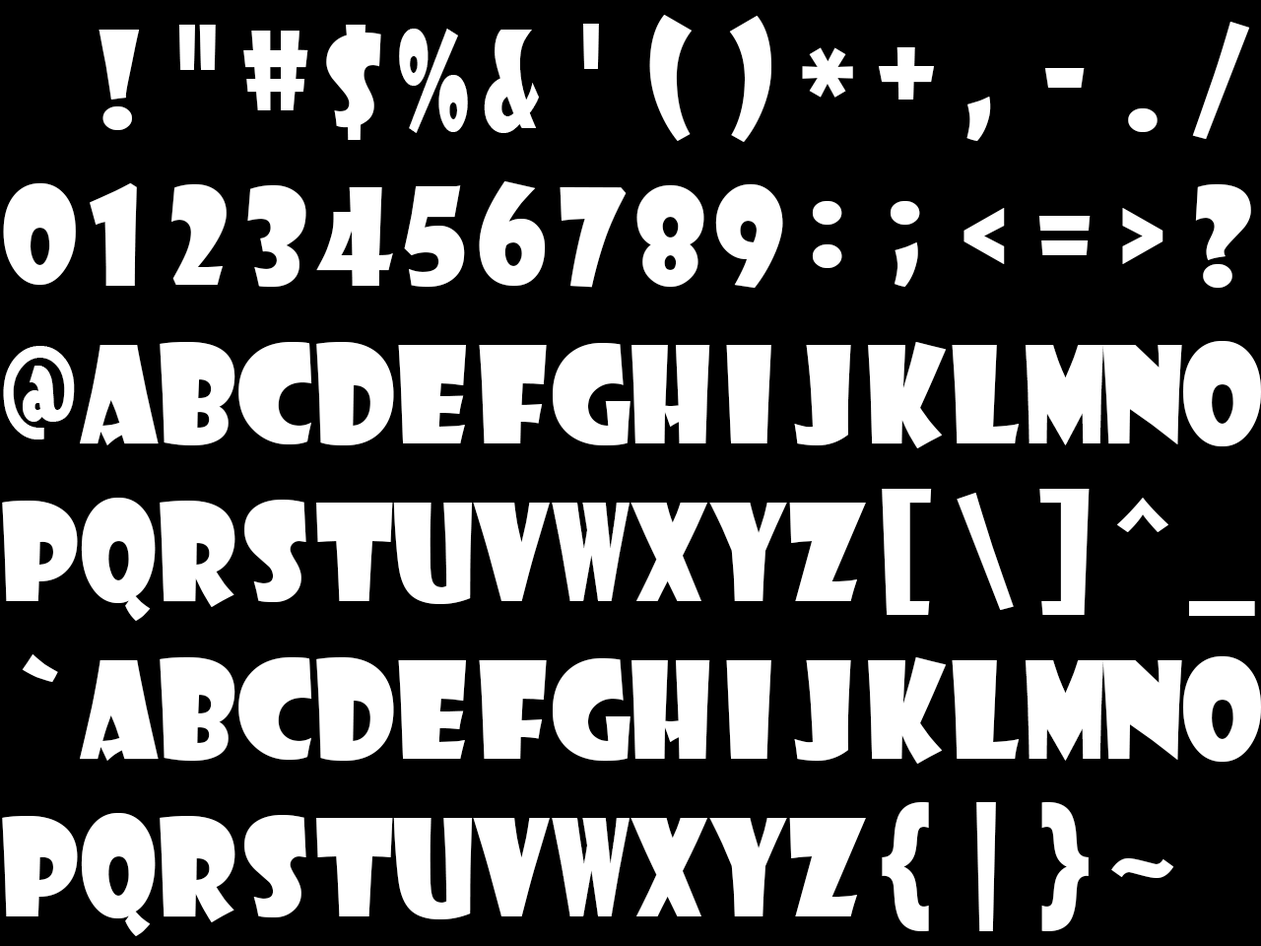
<style>
.page{position:relative;width:1261px;height:946px;background:#000000}
.page>*{position:absolute;margin:0}
.t1{font:131.3px "ShowcardGothic-Reg";color:#ffffff}
.t2{font:131.3px "ShowcardGothic-Reg";color:#ffffff;scale:0.7 1}
.t3{font:131.3px "ShowcardGothic-Reg";color:#ffffff;scale:0.9 1}
.t4{font:131.3px "ShowcardGothic-Reg";color:#ffffff;scale:0.88 1}
.t5{font:131.3px "ShowcardGothic-Reg";color:#ffffff;scale:0.83 1}
.t6{font:131.3px "ShowcardGothic-Reg";color:#ffffff;scale:0.75 1}
.t7{font:131.3px "ShowcardGothic-Reg";color:#ffffff;scale:0.95 1}
.t8{font:131.3px "ShowcardGothic-Reg";color:#ffffff;scale:0.8 1}
.t9{font:131.3px "ShowcardGothic-Reg";color:#ffffff;scale:0.85 1}
.t10{font:131.3px "ShowcardGothic-Reg";color:#ffffff;scale:0.87 1}
.t11{font:131.3px "ShowcardGothic-Reg";color:#ffffff;scale:0.89 1}
.t12{font:131.3px "ShowcardGothic-Reg";color:#ffffff;scale:0.58 1}
</style>
<div class="page">
<p class="t1" style="left:649px;top:15px;width:43px;height:126px">(</p>
<p class="t1" style="left:729px;top:16px;width:42px;height:126px">)</p>
<p class="t1" style="left:99px;top:30px;width:41px;height:100px">!</p>
<p class="t1" style="left:178px;top:25px;width:38px;height:45px">"</p>
<p class="t1" style="left:326px;top:25px;width:55px;height:115px">$</p>
<p class="t2" style="left:399px;top:29px;width:69px;height:104px">%</p>
<p class="t2" style="left:484px;top:30px;width:55px;height:103px">&amp;</p>
<p class="t1" style="left:582px;top:24px;width:17px;height:45px">'</p>
<p class="t1" style="left:1192px;top:22px;width:58px;height:117px">/</p>
<p class="t1" style="left:243px;top:31px;width:65px;height:79px">#</p>
<p class="t1" style="left:802px;top:47px;width:51px;height:51px">*</p>
<p class="t1" style="left:879px;top:47px;width:55px;height:52px">+</p>
<p class="t1" style="left:1044px;top:68px;width:41px;height:20px">-</p>
<p class="t1" style="left:966px;top:97px;width:25px;height:44px">,</p>
<p class="t1" style="left:1128px;top:108px;width:29px;height:24px">.</p>
<p class="t1" style="left:3px;top:183px;width:73px;height:102px">0</p>
<p class="t1" style="left:90px;top:183px;width:47px;height:103px">1</p>
<p class="t1" style="left:171px;top:184px;width:56px;height:101px">2</p>
<p class="t1" style="left:247px;top:185px;width:59px;height:102px">3</p>
<p class="t1" style="left:404px;top:185px;width:61px;height:102px">5</p>
<p class="t1" style="left:479px;top:181px;width:67px;height:105px">6</p>
<p class="t1" style="left:636px;top:185px;width:68px;height:102px">8</p>
<p class="t1" style="left:715px;top:184px;width:68px;height:104px">9</p>
<p class="t1" style="left:1195px;top:184px;width:56px;height:104px">?</p>
<p class="t1" style="left:316px;top:187px;width:77px;height:99px">4</p>
<p class="t1" style="left:560px;top:187px;width:67px;height:101px">7</p>
<p class="t1" style="left:812px;top:201px;width:30px;height:67px">:</p>
<p class="t1" style="left:890px;top:201px;width:30px;height:86px">;</p>
<p class="t1" style="left:963px;top:208px;width:42px;height:56px">&lt;</p>
<p class="t1" style="left:1122px;top:208px;width:41px;height:56px">&gt;</p>
<p class="t1" style="left:1038px;top:216px;width:52px;height:39px">=</p>
<p class="t3" style="left:160px;top:342px;width:75px;height:103px">B</p>
<p class="t1" style="left:238px;top:342px;width:74px;height:102px">C</p>
<p class="t4" style="left:316px;top:342px;width:78px;height:103px">D</p>
<p class="t5" style="left:868px;top:342px;width:79px;height:106px">K</p>
<p class="t3" style="left:1183px;top:341px;width:78px;height:105px">O</p>
<p class="t6" style="left:3px;top:346px;width:72px;height:93px">@</p>
<p class="t7" style="left:80px;top:345px;width:79px;height:100px">A</p>
<p class="t1" style="left:398px;top:345px;width:68px;height:98px">E</p>
<p class="t1" style="left:479px;top:345px;width:68px;height:98px">F</p>
<p class="t3" style="left:553px;top:343px;width:77px;height:102px">G</p>
<p class="t8" style="left:631px;top:345px;width:79px;height:98px">H</p>
<p class="t1" style="left:726px;top:345px;width:45px;height:98px">I</p>
<p class="t1" style="left:794px;top:345px;width:57px;height:100px">J</p>
<p class="t1" style="left:952px;top:345px;width:68px;height:98px">L</p>
<p class="t6" style="left:1025px;top:345px;width:78px;height:100px">M</p>
<p class="t1" style="left:1102px;top:345px;width:80px;height:99px">N</p>
<p class="t9" style="left:81px;top:497px;width:75px;height:124px">Q</p>
<p class="t1" style="left:882px;top:489px;width:50px;height:126px">[</p>
<p class="t1" style="left:957px;top:493px;width:57px;height:117px">\</p>
<p class="t1" style="left:1039px;top:489px;width:51px;height:126px">]</p>
<p class="t1" style="left:1116px;top:497px;width:52px;height:35px">^</p>
<p class="t3" style="left:2px;top:500px;width:76px;height:101px">P</p>
<p class="t10" style="left:160px;top:500px;width:75px;height:107px">R</p>
<p class="t1" style="left:244px;top:499px;width:62px;height:103px">S</p>
<p class="t7" style="left:316px;top:502px;width:77px;height:99px">T</p>
<p class="t11" style="left:393px;top:502px;width:80px;height:102px">U</p>
<p class="t3" style="left:473px;top:502px;width:77px;height:99px">V</p>
<p class="t12" style="left:552px;top:502px;width:77px;height:99px">W</p>
<p class="t8" style="left:630px;top:502px;width:77px;height:99px">X</p>
<p class="t9" style="left:709px;top:502px;width:78px;height:99px">Y</p>
<p class="t7" style="left:789px;top:502px;width:77px;height:99px">Z</p>
<p class="t1" style="left:1189px;top:601px;width:66px;height:15px">_</p>
<p class="t1" style="left:22px;top:654px;width:36px;height:28px">`</p>
<p class="t7" style="left:80px;top:660px;width:79px;height:100px">A</p>
<p class="t3" style="left:160px;top:657px;width:75px;height:103px">B</p>
<p class="t1" style="left:238px;top:657px;width:74px;height:103px">C</p>
<p class="t4" style="left:316px;top:657px;width:78px;height:103px">D</p>
<p class="t1" style="left:398px;top:660px;width:68px;height:99px">E</p>
<p class="t1" style="left:479px;top:660px;width:68px;height:99px">F</p>
<p class="t3" style="left:553px;top:658px;width:77px;height:102px">G</p>
<p class="t8" style="left:631px;top:660px;width:79px;height:99px">H</p>
<p class="t1" style="left:726px;top:660px;width:45px;height:99px">I</p>
<p class="t1" style="left:794px;top:660px;width:57px;height:100px">J</p>
<p class="t5" style="left:868px;top:657px;width:79px;height:106px">K</p>
<p class="t1" style="left:952px;top:660px;width:68px;height:99px">L</p>
<p class="t6" style="left:1025px;top:660px;width:78px;height:100px">M</p>
<p class="t1" style="left:1102px;top:660px;width:80px;height:100px">N</p>
<p class="t3" style="left:1183px;top:656px;width:78px;height:105px">O</p>
<p class="t7" style="left:882px;top:802px;width:47px;height:129px">{</p>
<p class="t7" style="left:976px;top:802px;width:20px;height:129px">|</p>
<p class="t7" style="left:1041px;top:802px;width:48px;height:129px">}</p>
<p class="t3" style="left:2px;top:816px;width:76px;height:100px">P</p>
<p class="t9" style="left:81px;top:813px;width:75px;height:123px">Q</p>
<p class="t10" style="left:160px;top:816px;width:75px;height:106px">R</p>
<p class="t1" style="left:244px;top:815px;width:62px;height:102px">S</p>
<p class="t7" style="left:316px;top:818px;width:77px;height:98px">T</p>
<p class="t11" style="left:393px;top:818px;width:80px;height:101px">U</p>
<p class="t3" style="left:473px;top:818px;width:77px;height:98px">V</p>
<p class="t12" style="left:552px;top:818px;width:77px;height:98px">W</p>
<p class="t8" style="left:630px;top:818px;width:77px;height:98px">X</p>
<p class="t9" style="left:709px;top:818px;width:78px;height:98px">Y</p>
<p class="t7" style="left:789px;top:818px;width:77px;height:98px">Z</p>
<p class="t7" style="left:1111px;top:858px;width:63px;height:20px">~</p>
</div>
